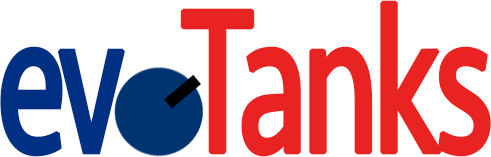
<style>
.page{position:relative;width:491px;height:157px;background:#ffffff}
.page>*{position:absolute;margin:0}
.t1{font:211.1px "Seravek";letter-spacing:-0.08em;color:#e92222;font-weight:bold;scale:0.67 1}
.t2{font:211.1px "Seravek";letter-spacing:-0.08em;color:#003083;font-weight:bold;scale:0.67 1}
</style>
<div class="page">
<p class="t1" style="left:0px;top:0px;width:491px;height:157px"><span class="t2">ev   </span>Tanks</p>
</div>
